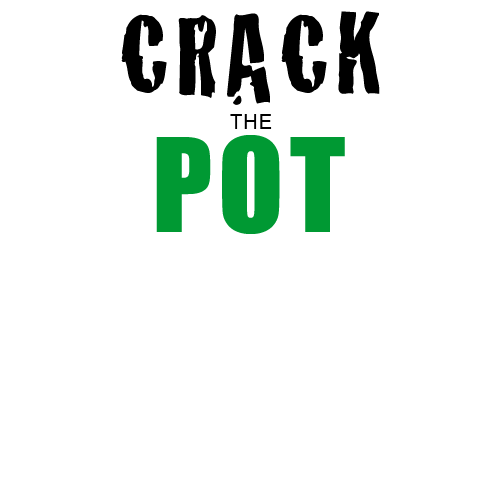
<style>
.page{position:relative;width:500px;height:500px;background:#ffffff}
.page>*{position:absolute;margin:0}
.t1{font:120px "Cracked";letter-spacing:0.05em;color:#000000}
.t2{font:20px "ArialMT";letter-spacing:0.05em;color:#000000}
.t3{font:120px "Impact";letter-spacing:0.05em;color:#009933}
</style>
<div class="page">
<p class="t1" style="left:121px;top:11px;width:259px;height:94px">CRACK</p>
<p class="t2" style="left:230px;top:114px;width:42px;height:15px">THE</p>
<p class="t3" style="left:156px;top:135px;width:189px;height:99px">POT</p>
</div>
